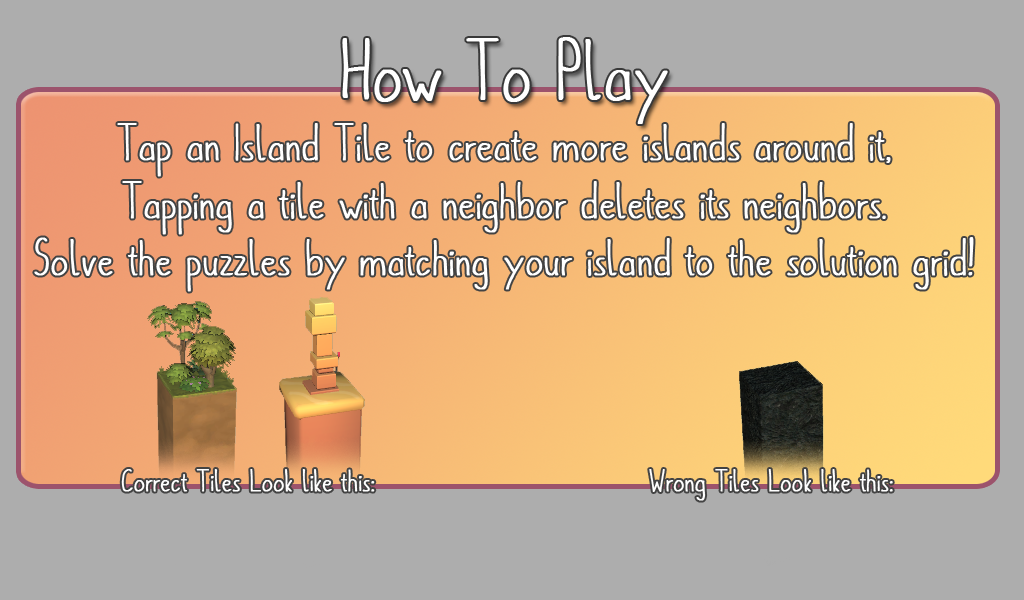
<style>
.page{position:relative;width:1024px;height:600px;background:#adadad}
.page>*{position:absolute;margin:0}
.t1{font:80px "metafors-Regular";color:#ffffff;font-weight:bold}
.t2{font:48px "metafors-Regular";color:#ffffff;font-weight:bold}
.t3{font:30px "metafors-Regular";color:#ffffff;font-weight:bold}
</style>
<div class="page">
<p class="t1" style="left:342px;top:37px;width:326px;height:87px">How To Play</p>
<p class="t2" style="left:34px;top:123px;width:940px;height:169px;text-align:center">Tap an Island Tile to create more islands around it,<br>Tapping a tile with a neighbor deletes its neighbors.<br>Solve the puzzles by matching your island to the solution grid!</p>
<p class="t3" style="left:121px;top:469px;width:254px;height:23px">Correct Tiles Look like this:</p>
<p class="t3" style="left:649px;top:469px;width:244px;height:32px">Wrong Tiles Look like this:</p>
</div>
